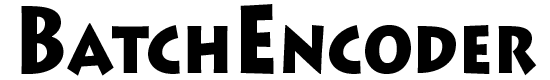
<style>
.page{position:relative;width:550px;height:80px;background:#ffffff}
.page>*{position:absolute;margin:0}
.t1{font:78.9px "LithosPro-Black";color:#000000;scale:0.77 1}
.t2{font:94.6px "LithosPro-Black";color:#000000;scale:0.77 1}
</style>
<div class="page">
<p class="t1" style="left:21px;top:4px;width:516px;height:72px"><span class="t2">B</span>atch<span class="t2">E</span>ncoder</p>
</div>
